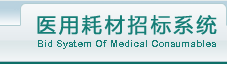
<style>
.page{position:relative;width:227px;height:64px}
.page>*{position:absolute;margin:0}
.t1{font:20px "MicrosoftYaHei";letter-spacing:0.12em;color:#167e77;font-weight:bold}
.t2{font:10px "ArialRoundedMTBold";color:#167e77}
</style>
<div class="page">
<p class="t1" style="left:37px;top:15px;width:180px;height:20px">医用耗材招标系统</p>
<p class="t2" style="left:38px;top:40px;width:178px;height:9px">Bid System Of Medical Consumables</p>
</div>
